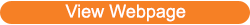
<style>
.page{position:relative;width:250px;height:25px;background:#f68025}
.page>*{position:absolute;margin:0}
.t1{font:18px "ArialMT";color:#ffffff}
</style>
<div class="page">
<p class="t1" style="left:65px;top:4px;width:121px;height:18px">View Webpage</p>
</div>
